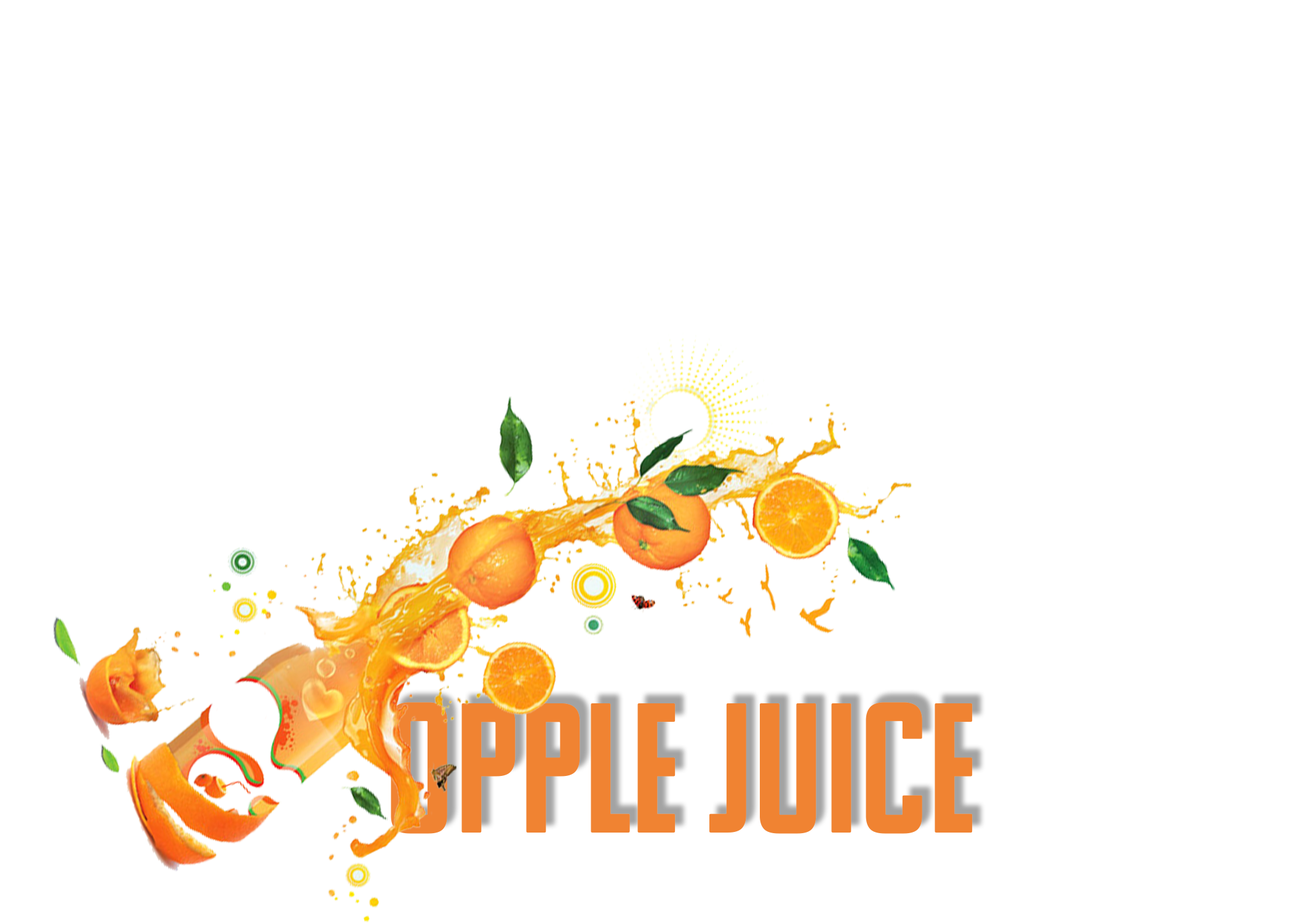
<style>
.page{position:relative;width:1292px;height:923px;background:#ffffff}
.page>*{position:absolute;margin:0}
.t1{font:184.6px "KomuA";color:#f08332}
</style>
<div class="page">
<p class="t1" style="left:391px;top:702px;width:582px;height:132px">OPPLE JUICE</p>
</div>
